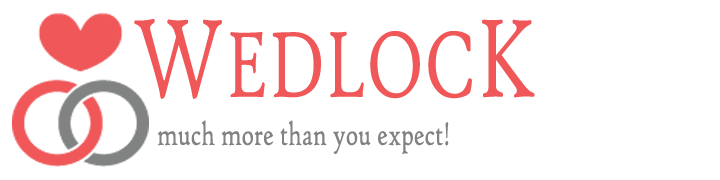
<style>
.page{position:relative;width:720px;height:180px;background:#ffffff}
.page>*{position:absolute;margin:0}
.t1{font:100px "HighTowerText-Reg";letter-spacing:0.002em;color:#f05759;scale:0.7 1}
.t2{font:120px "HighTowerText-Reg";letter-spacing:0.002em;color:#f05759;scale:0.7 1}
.t3{font:35px "HighTowerText-Reg";letter-spacing:0.002em;color:#818282;scale:0.7 1}
</style>
<div class="page">
<p class="t1" style="left:134px;top:19px;width:401px;height:80px"><span class="t2">W</span>EDLOC<span class="t2">K</span></p>
<p class="t3" style="left:157px;top:120px;width:292px;height:34px">much more than you expect!</p>
</div>
